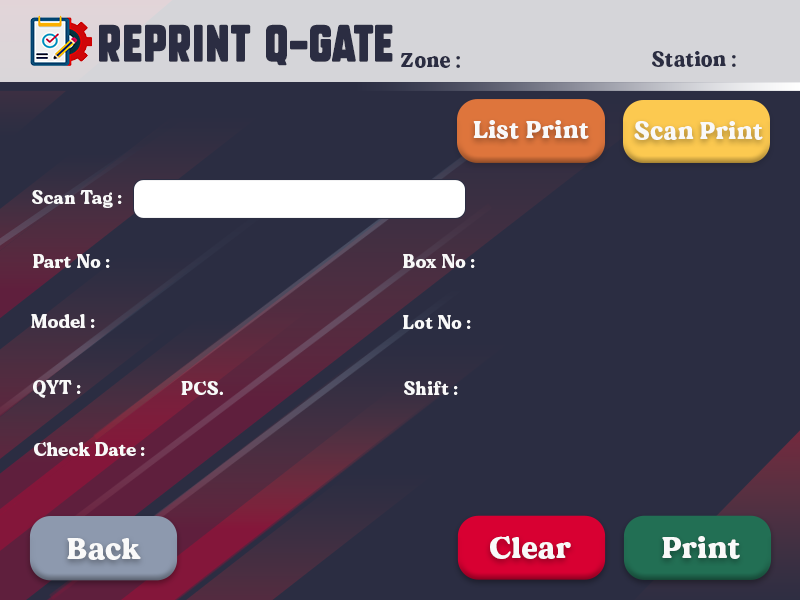
<style>
.page{position:relative;width:800px;height:600px;background:#2b2d42}
.page>*{position:absolute;margin:0}
.t1{font:36px "SubtleCurves";letter-spacing:0.025em;color:#2b2d42}
.t2{font:20px "MADEDillan";letter-spacing:0.025em;color:#2b2d42}
.t3{font:24px "MADEDillan";letter-spacing:0.025em;color:#f9f9f9}
.t4{font:18px "MADEDillan";letter-spacing:0.025em;color:#f9f9f9}
.t5{font:30px "MADEDillan";letter-spacing:0.025em;color:#f9f9f9}
</style>
<div class="page">
<p class="t1" style="left:99px;top:24px;width:294px;height:42px">Reprint q-gate</p>
<p class="t2" style="left:401px;top:53px;width:59px;height:15px">Zone :</p>
<p class="t2" style="left:652px;top:51px;width:84px;height:16px">Station :</p>
<p class="t3" style="left:473px;top:120px;width:116px;height:19px">List Print</p>
<p class="t3" style="left:634px;top:121px;width:129px;height:19px">Scan Print</p>
<p class="t4" style="left:32px;top:190px;width:90px;height:18px">Scan Tag :</p>
<p class="t4" style="left:33px;top:254px;width:77px;height:14px">Part No :</p>
<p class="t4" style="left:403px;top:254px;width:72px;height:14px">Box No :</p>
<p class="t4" style="left:31px;top:314px;width:64px;height:14px">Model :</p>
<p class="t4" style="left:403px;top:315px;width:68px;height:14px">Lot No :</p>
<p class="t4" style="left:33px;top:380px;width:48px;height:18px">QYT :</p>
<p class="t4" style="left:181px;top:381px;width:42px;height:14px">PCS.</p>
<p class="t4" style="left:404px;top:381px;width:54px;height:14px">Shift :</p>
<p class="t4" style="left:34px;top:442px;width:111px;height:14px">Check Date :</p>
<p class="t5" style="left:67px;top:538px;width:74px;height:22px">Back</p>
<p class="t5" style="left:490px;top:536px;width:81px;height:23px">Clear</p>
<p class="t5" style="left:662px;top:536px;width:78px;height:23px">Print</p>
</div>
